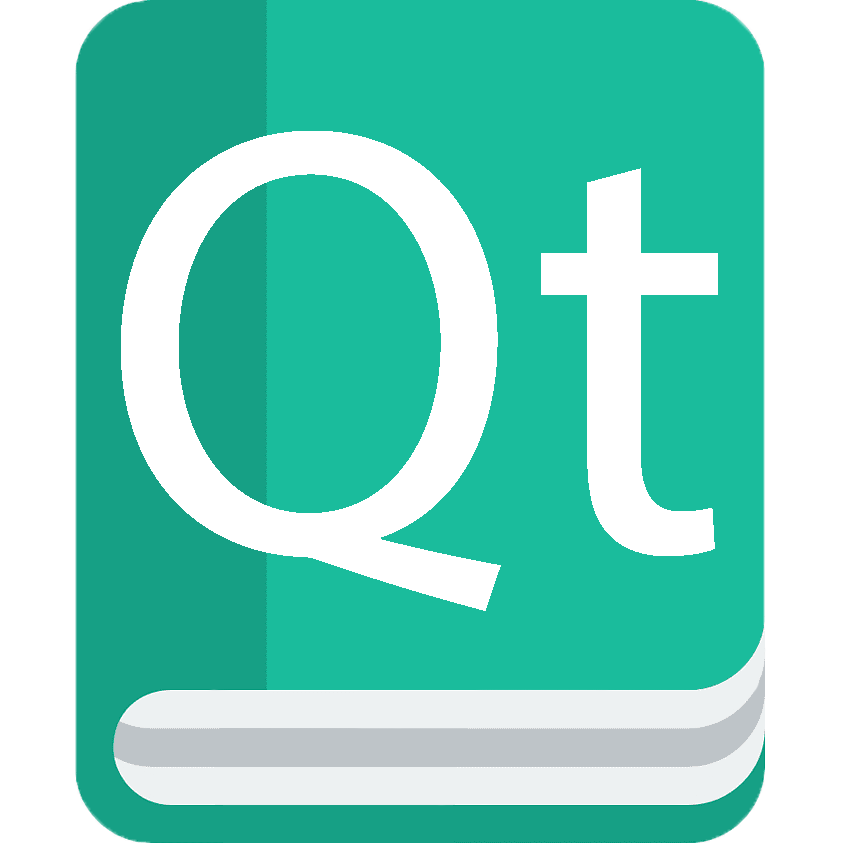
<style>
.page{position:relative;width:843px;height:843px;background:#1abc9c}
.page>*{position:absolute;margin:0}
.t1{font:611.1px "MyriadPro-Regular";color:#ffffff}
</style>
<div class="page">
<p class="t1" style="left:121px;top:131px;width:597px;height:480px">Qt</p>
</div>
